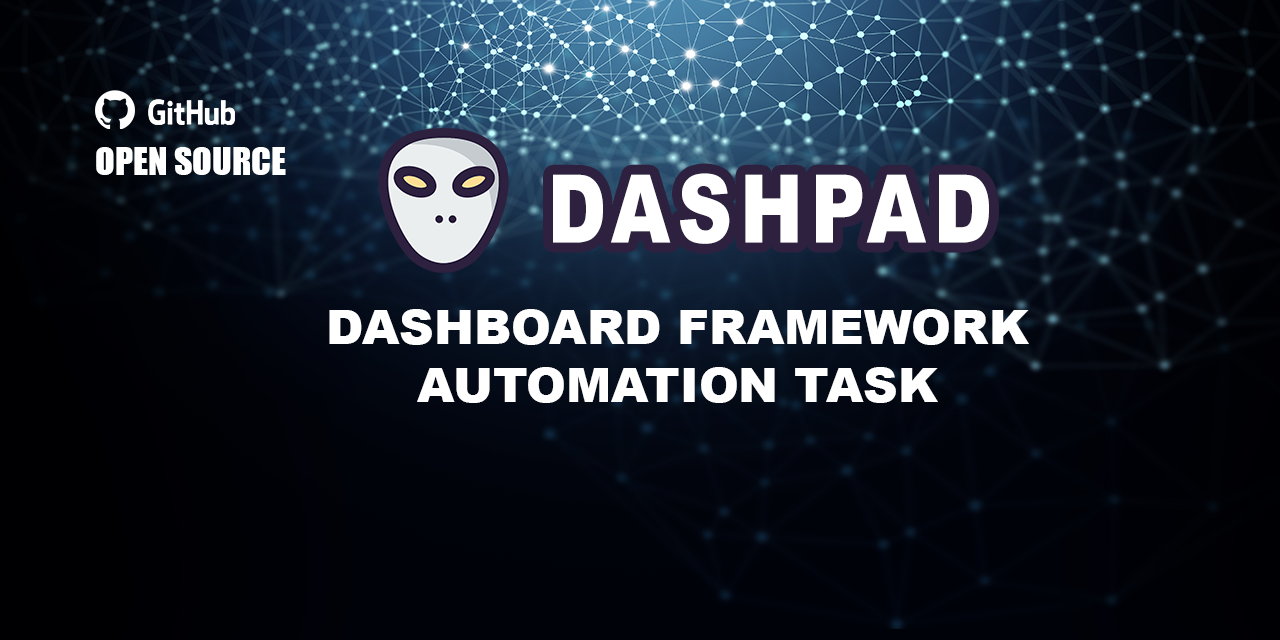
<style>
.page{position:relative;width:1280px;height:640px}
.page>*{position:absolute;margin:0}
.t1{font:36px "Impact";color:#ffffff;text-transform:uppercase}
.t2{font:94.5px "Arial-Black";letter-spacing:0.1em;color:#ffffff;text-transform:uppercase;scale:0.8 1}
.t3{font:48px "Arial-Black";color:#ffffff;text-transform:uppercase}
</style>
<div class="page">
<p class="t1" style="left:96px;top:147px;width:190px;height:28px">OPEN SOURCE</p>
<p class="t2" style="left:553px;top:173px;width:436px;height:71px">Dashpad</p>
<p class="t3" style="left:329px;top:309px;width:700px;height:94px;text-align:center">dashboard framework <br>automation task</p>
</div>
